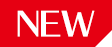
<style>
.page{position:relative;width:112px;height:47px;background:#e60012}
.page>*{position:absolute;margin:0}
.t1{font:32px "UDTypos515-P";letter-spacing:-0.025em;color:#ffffff;text-transform:uppercase}
</style>
<div class="page">
<p class="t1" style="left:17px;top:10px;width:78px;height:27px">NEw</p>
</div>
